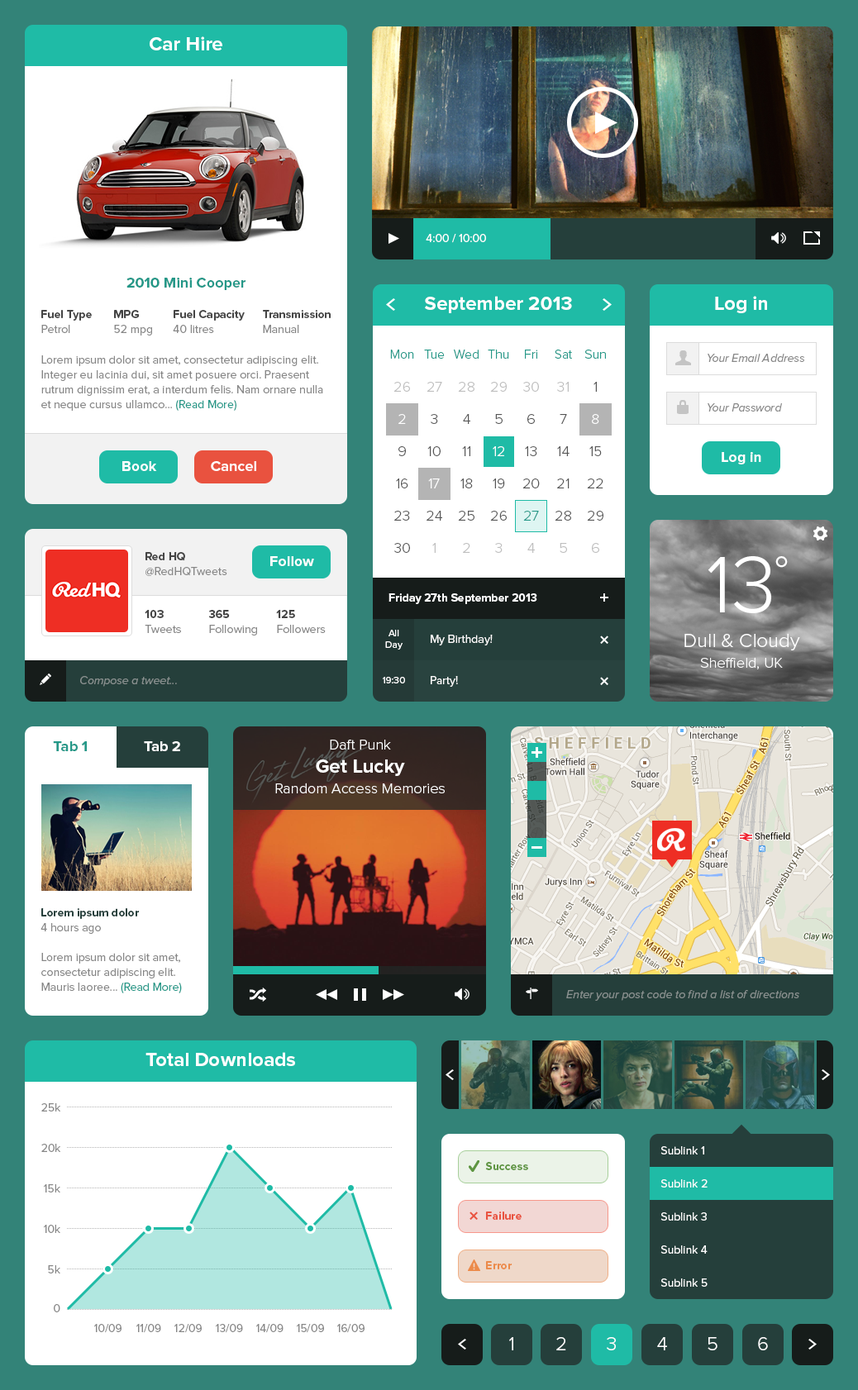
<style>
.page{position:relative;width:858px;height:1390px;background:#ffffff}
.page>*{position:absolute;margin:0}
.t1{font:19.8px "ProximaNova-Bold";color:#ffffff}
.t2{font:11.6px "ProximaNova-Regular";color:#ffffff}
.t3{font:14.9px "ProximaNova-Bold";color:#249888}
.t4{font:11.6px/14.9px "ProximaNova-Bold";color:#444444}
.t5{font:11.6px/14.9px "ProximaNova-Regular";color:#878787}
.t6{font:13.2px "ProximaNova-Light";color:#249888}
.t7{font:11.6px "ProximaNova-RegularIt";color:#878787}
.t8{font:11.6px/14.9px "ProximaNova-Regular";color:#249888}
.t9{font:14.9px "ProximaNova-Light";color:#bebebe}
.t10{font:14.9px "ProximaNova-Light";color:#555555}
.t11{font:14.9px "ProximaNova-Light";color:#ffffff}
.t12{font:14.9px "ProximaNova-Bold";color:#ffffff}
.t13{font:14.9px "ProximaNova-Light";color:#249888}
.t14{font:82.6px "ProximaNova-Light";color:#ffffff}
.t15{font:49.6px "ProximaNova-Light";color:#ffffff}
.t16{font:11.6px "ProximaNova-Bold";color:#ffffff}
.t17{font:9.9px "ProximaNova-Regular";color:#ffffff}
.t18{font:11.6px "ProximaNova-Regular";color:#fffefe}
.t19{font:19.8px "ProximaNova-Light";color:#ffffff}
.t20{font:11.6px "ProximaNova-RegularIt";color:#89918f}
.t21{font:11.6px/14.9px "ProximaNova-Bold";color:#253f3b}
.t22{font:11.6px "ProximaNova-Regular";color:#878787}
.t23{font:11.6px "ProximaNova-Bold";color:#5e9541}
.t24{font:11.6px "ProximaNova-Bold";color:#e9523f}
.t25{font:11.6px "ProximaNova-Bold";color:#ec8a49}
</style>
<div class="page">
<p class="t1" style="left:150px;top:36px;width:72px;height:14px">Car Hire</p>
<p class="t2" style="left:426px;top:234px;width:60px;height:9px">4:00 / 10:00</p>
<p class="t3" style="left:126px;top:278px;width:119px;height:12px">2010 Mini Cooper</p>
<p class="t1" style="left:425px;top:296px;width:147px;height:17px">September 2013</p>
<p class="t1" style="left:715px;top:296px;width:52px;height:17px">Log in</p>
<p class="t4" style="left:41px;top:310px;width:51px;height:23px">Fuel Type<br><span class="t5">Petrol</span></p>
<p class="t5" style="left:114px;top:310px;width:38px;height:26px"><span class="t4">MPG<br></span>52 mpg</p>
<p class="t4" style="left:173px;top:310px;width:72px;height:23px">Fuel Capacity<br><span class="t5">40 litres</span></p>
<p class="t4" style="left:263px;top:310px;width:68px;height:23px">Transmission<br><span class="t5">Manual</span></p>
<p class="t6" style="left:390px;top:350px;width:24px;height:9px">Mon</p>
<p class="t6" style="left:424px;top:350px;width:21px;height:9px">Tue</p>
<p class="t6" style="left:454px;top:350px;width:25px;height:9px">Wed</p>
<p class="t6" style="left:488px;top:350px;width:21px;height:9px">Thu</p>
<p class="t6" style="left:525px;top:350px;width:12px;height:9px">Fri</p>
<p class="t6" style="left:555px;top:350px;width:17px;height:9px">Sat</p>
<p class="t6" style="left:584px;top:350px;width:22px;height:9px">Sun</p>
<p class="t7" style="left:707px;top:354px;width:97px;height:8px">Your Email Address</p>
<p class="t5" style="left:41px;top:355px;width:282px;height:56px">Lorem ipsum dolor sit amet, consectetur adipiscing elit. Integer eu lacinia dui, sit amet posuere orci. Praesent rutrum dignissim erat, a interdum felis. Nam ornare nulla et neque cursus ullamco... <span class="t8">(Read More)</span></p>
<p class="t9" style="left:393px;top:382px;width:17px;height:10px">26</p>
<p class="t9" style="left:426px;top:382px;width:16px;height:10px">27</p>
<p class="t9" style="left:458px;top:382px;width:16px;height:10px">28</p>
<p class="t9" style="left:490px;top:382px;width:17px;height:10px">29</p>
<p class="t9" style="left:523px;top:382px;width:16px;height:10px">30</p>
<p class="t9" style="left:557px;top:382px;width:12px;height:10px">31</p>
<p class="t10" style="left:593px;top:382px;width:4px;height:10px">1</p>
<p class="t7" style="left:707px;top:403px;width:75px;height:9px">Your Password</p>
<p class="t11" style="left:398px;top:414px;width:8px;height:10px">2</p>
<p class="t10" style="left:431px;top:414px;width:7px;height:10px">3</p>
<p class="t10" style="left:463px;top:414px;width:7px;height:10px">4</p>
<p class="t10" style="left:495px;top:414px;width:7px;height:10px">5</p>
<p class="t10" style="left:527px;top:414px;width:8px;height:10px">6</p>
<p class="t10" style="left:559px;top:414px;width:8px;height:10px">7</p>
<p class="t11" style="left:592px;top:414px;width:7px;height:10px">8</p>
<p class="t10" style="left:398px;top:446px;width:8px;height:10px">9</p>
<p class="t10" style="left:427px;top:446px;width:13px;height:10px">10</p>
<p class="t10" style="left:462px;top:446px;width:8px;height:10px">11</p>
<p class="t11" style="left:493px;top:446px;width:11px;height:10px">12</p>
<p class="t10" style="left:525px;top:446px;width:12px;height:10px">13</p>
<p class="t10" style="left:557px;top:446px;width:12px;height:10px">14</p>
<p class="t10" style="left:589px;top:446px;width:13px;height:10px">15</p>
<p class="t12" style="left:122px;top:461px;width:35px;height:10px">Book</p>
<p class="t12" style="left:211px;top:461px;width:45px;height:10px">Cancel</p>
<p class="t12" style="left:721px;top:452px;width:40px;height:12px">Log in</p>
<p class="t10" style="left:396px;top:479px;width:12px;height:9px">16</p>
<p class="t11" style="left:428px;top:479px;width:12px;height:9px">17</p>
<p class="t10" style="left:460px;top:479px;width:13px;height:9px">18</p>
<p class="t10" style="left:493px;top:479px;width:12px;height:9px">19</p>
<p class="t10" style="left:522px;top:479px;width:18px;height:9px">20</p>
<p class="t10" style="left:557px;top:479px;width:12px;height:9px">21</p>
<p class="t10" style="left:587px;top:479px;width:16px;height:9px">22</p>
<p class="t10" style="left:394px;top:511px;width:16px;height:10px">23</p>
<p class="t10" style="left:426px;top:511px;width:16px;height:10px">24</p>
<p class="t10" style="left:458px;top:511px;width:16px;height:10px">25</p>
<p class="t10" style="left:490px;top:511px;width:17px;height:10px">26</p>
<p class="t13" style="left:523px;top:511px;width:16px;height:10px">27</p>
<p class="t10" style="left:555px;top:511px;width:16px;height:10px">28</p>
<p class="t10" style="left:587px;top:511px;width:16px;height:10px">29</p>
<p class="t10" style="left:394px;top:543px;width:16px;height:10px">30</p>
<p class="t9" style="left:432px;top:543px;width:4px;height:10px">1</p>
<p class="t9" style="left:463px;top:543px;width:7px;height:10px">2</p>
<p class="t9" style="left:495px;top:543px;width:7px;height:10px">3</p>
<p class="t9" style="left:527px;top:543px;width:8px;height:10px">4</p>
<p class="t9" style="left:559px;top:543px;width:8px;height:10px">5</p>
<p class="t9" style="left:592px;top:543px;width:7px;height:10px">6</p>
<p class="t5" style="left:145px;top:552px;width:82px;height:24px"><span class="t4">Red HQ<br></span>@RedHQTweets</p>
<p class="t12" style="left:270px;top:556px;width:44px;height:10px">Follow</p>
<p class="t14" style="left:707px;top:556px;width:64px;height:57px">13</p>
<p class="t15" style="left:775px;top:556px;width:13px;height:12px">°</p>
<p class="t16" style="left:388px;top:593px;width:149px;height:11px">Friday 27th September 2013</p>
<p class="t5" style="left:145px;top:610px;width:36px;height:23px"><span class="t4">103<br></span>Tweets</p>
<p class="t5" style="left:208px;top:610px;width:49px;height:26px"><span class="t4">365<br></span>Following</p>
<p class="t5" style="left:276px;top:610px;width:50px;height:23px"><span class="t4">125<br></span>Followers</p>
<p class="t17" style="left:385px;top:630px;width:17px;height:20px;text-align:center">All<br>Day</p>
<p class="t18" style="left:431px;top:635px;width:62px;height:10px">My Birthday!</p>
<p class="t19" style="left:684px;top:633px;width:116px;height:17px">Dull &amp; Cloudy</p>
<p class="t11" style="left:700px;top:657px;width:83px;height:12px">Sheffield, UK</p>
<p class="t20" style="left:80px;top:676px;width:97px;height:11px">Compose a tweet...</p>
<p class="t17" style="left:383px;top:677px;width:22px;height:6px">19:30</p>
<p class="t2" style="left:431px;top:676px;width:27px;height:11px">Party!</p>
<p class="t3" style="left:53px;top:741px;width:34px;height:10px">Tab 1</p>
<p class="t12" style="left:144px;top:741px;width:36px;height:10px">Tab 2</p>
<p class="t11" style="left:330px;top:740px;width:61px;height:10px">Daft Punk</p>
<p class="t1" style="left:316px;top:759px;width:89px;height:17px">Get Lucky</p>
<p class="t11" style="left:275px;top:783px;width:170px;height:10px">Random Access Memories</p>
<p class="t5" style="left:40px;top:908px;width:142px;height:85px"><span class="t21">Lorem ipsum dolor<br></span>4 hours ago<br><br>Lorem ipsum dolor sit amet, consectetur adipiscing elit. Mauris laoree... <span class="t8">(Read More)</span></p>
<p class="t20" style="left:566px;top:990px;width:233px;height:11px">Enter your post code to find a list of directions</p>
<p class="t1" style="left:145px;top:1052px;width:150px;height:14px">Total Downloads</p>
<p class="t22" style="left:41px;top:1103px;width:19px;height:9px">25k</p>
<p class="t22" style="left:41px;top:1144px;width:19px;height:8px">20k</p>
<p class="t2" style="left:660px;top:1146px;width:44px;height:9px">Sublink 1</p>
<p class="t23" style="left:485px;top:1162px;width:43px;height:8px">Success</p>
<p class="t2" style="left:660px;top:1179px;width:47px;height:9px">Sublink 2</p>
<p class="t22" style="left:44px;top:1184px;width:16px;height:9px">15k</p>
<p class="t24" style="left:486px;top:1212px;width:35px;height:8px">Failure</p>
<p class="t2" style="left:660px;top:1212px;width:47px;height:9px">Sublink 3</p>
<p class="t22" style="left:44px;top:1225px;width:16px;height:8px">10k</p>
<p class="t2" style="left:660px;top:1245px;width:47px;height:9px">Sublink 4</p>
<p class="t22" style="left:48px;top:1265px;width:12px;height:9px">5k</p>
<p class="t25" style="left:486px;top:1261px;width:26px;height:8px">Error</p>
<p class="t2" style="left:660px;top:1278px;width:47px;height:9px">Sublink 5</p>
<p class="t22" style="left:54px;top:1304px;width:6px;height:8px">0</p>
<p class="t22" style="left:94px;top:1324px;width:27px;height:9px">10/09</p>
<p class="t22" style="left:136px;top:1324px;width:25px;height:9px">11/09</p>
<p class="t22" style="left:174px;top:1324px;width:28px;height:9px">12/09</p>
<p class="t22" style="left:216px;top:1324px;width:27px;height:9px">13/09</p>
<p class="t22" style="left:256px;top:1324px;width:27px;height:9px">14/09</p>
<p class="t22" style="left:297px;top:1324px;width:27px;height:9px">15/09</p>
<p class="t22" style="left:337px;top:1324px;width:27px;height:9px">16/09</p>
<p class="t19" style="left:509px;top:1337px;width:4px;height:13px">1</p>
<p class="t19" style="left:556px;top:1337px;width:10px;height:13px">2</p>
<p class="t19" style="left:607px;top:1337px;width:9px;height:13px">3</p>
<p class="t19" style="left:657px;top:1337px;width:10px;height:13px">4</p>
<p class="t19" style="left:707px;top:1337px;width:10px;height:13px">5</p>
<p class="t19" style="left:758px;top:1337px;width:10px;height:13px">6</p>
</div>
